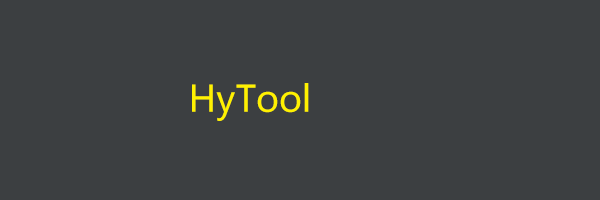
<style>
.page{position:relative;width:600px;height:200px;background:#3c3f41}
.page>*{position:absolute;margin:0}
.t1{font:36px "MicrosoftYaHeiUI";color:#fff100}
</style>
<div class="page">
<p class="t1" style="left:192px;top:83px;width:117px;height:38px">HyTool</p>
</div>
